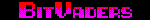
<style>
.page{position:relative;width:150px;height:20px;background:#000000}
.page>*{position:absolute;margin:0}
.t1{font:12px "pvaders"}
.t2{font:18px "pvaders"}
</style>
<div class="page">
<p class="t1" style="left:19px;top:2px;width:113px;height:16px"><span class="t2">B</span>IT<span class="t2">V</span>ADERS</p>
</div>
